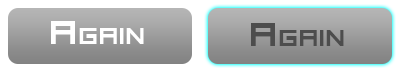
<style>
.page{position:relative;width:400px;height:70px;background:#ffffff}
.page>*{position:absolute;margin:0}
.t1{font:30px "Aerial";color:#ffffff;font-variant:small-caps}
.t2{font:30px "Aerial";color:#4d4d4d;font-variant:small-caps}
</style>
<div class="page">
<p class="t1" style="left:51px;top:21px;width:93px;height:23px">Again</p>
<p class="t2" style="left:251px;top:23px;width:93px;height:23px">Again</p>
</div>
